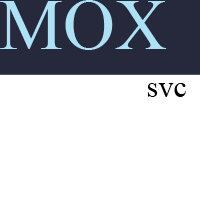
<style>
.page{position:relative;width:200px;height:200px;background:#ffffff}
.page>*{position:absolute;margin:0}
.t1{font:72px "TimesNewRomanPSMT";color:#ade2f6}
.t2{font:30px "TimesNewRomanPSMT";color:#000000}
</style>
<div class="page">
<p class="t1" style="left:0px;top:0px;width:167px;height:50px">MOX</p>
<p class="t2" style="left:148px;top:83px;width:38px;height:14px">svc</p>
</div>
